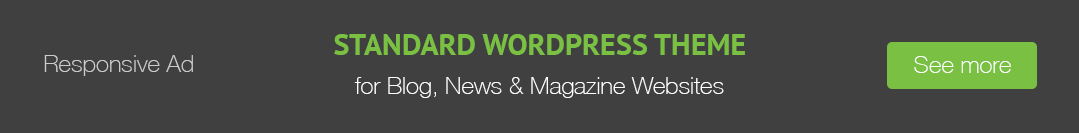
<style>
.page{position:relative;width:1079px;height:133px;background:#404040}
.page>*{position:absolute;margin:0}
.t1{font:30px "PTSans-Bold";color:#7ac143}
.t2{font:24px "HelveticaNeue-Thin";color:#cccccc}
.t3{font:24px "HelveticaNeue-Thin";color:#ffffff}
</style>
<div class="page">
<p class="t1" style="left:334px;top:34px;width:411px;height:21px">STANDARD WORDPRESS THEME</p>
<p class="t2" style="left:44px;top:55px;width:149px;height:21px">Responsive Ad</p>
<p class="t3" style="left:914px;top:56px;width:97px;height:17px">See more</p>
<p class="t3" style="left:354px;top:77px;width:370px;height:21px">for Blog, News &amp; Magazine Websites</p>
</div>
